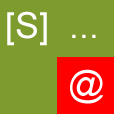
<style>
.page{position:relative;width:114px;height:114px;background:#7e9b2e}
.page>*{position:absolute;margin:0}
.t1{font:36px "ArialMT";color:#ffffff}
.t2{font:36px "ArialMT";letter-spacing:-0.01em;color:#ffffff}
</style>
<div class="page">
<p class="t1" style="left:7px;top:11px;width:40px;height:35px">[S]</p>
<p class="t1" style="left:72px;top:34px;width:24px;height:4px">...</p>
<p class="t2" style="left:70px;top:69px;width:34px;height:35px">@</p>
</div>
